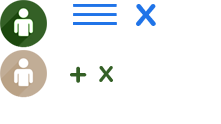
<style>
.page{position:relative;width:221px;height:124px;background:#ffffff}
.page>*{position:absolute;margin:0}
.t1{font:41.6px "GothamRounded-Medium";color:#2074e8}
.t2{font:32.1px "GothamRounded-Medium";color:#346026}
.t3{font:29px "GothamRounded-Medium";color:#346026}
</style>
<div class="page">
<p class="t1" style="left:136px;top:4px;width:20px;height:22px">x</p>
<p class="t2" style="left:70px;top:66px;width:43px;height:17px">+ <span class="t3">x</span></p>
</div>
